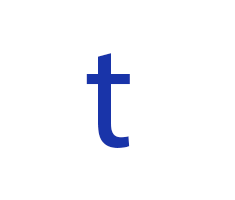
<style>
.page{position:relative;width:235px;height:200px;background:#ffffff}
.page>*{position:absolute;margin:0}
.t1{font:150px "MyriadPro-Regular";color:#1934a9}
</style>
<div class="page">
<p class="t1" style="left:86px;top:53px;width:44px;height:95px">t</p>
</div>
